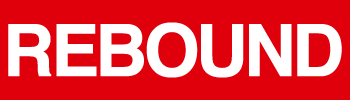
<style>
.page{position:relative;width:350px;height:100px;background:#e0000b}
.page>*{position:absolute;margin:0}
.t1{font:72px "Helvetica-Bold";letter-spacing:-0.08em;color:#ffffff;font-weight:bold}
</style>
<div class="page">
<p class="t1" style="left:8px;top:22px;width:334px;height:56px">REBOUND</p>
</div>
